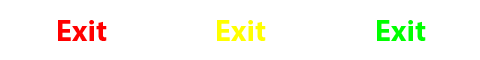
<style>
.page{position:relative;width:480px;height:60px;background:#ffffff}
.page>*{position:absolute;margin:0}
.t1{font:30px "MyriadPro-Bold";color:#ff0000}
.t2{font:30px "MyriadPro-Bold";color:#ffff00}
.t3{font:30px "MyriadPro-Bold";color:#00ff00}
</style>
<div class="page">
<p class="t1" style="left:58px;top:20px;width:49px;height:21px">Exit</p>
<p class="t2" style="left:217px;top:20px;width:49px;height:21px">Exit</p>
<p class="t3" style="left:377px;top:20px;width:49px;height:21px">Exit</p>
</div>
